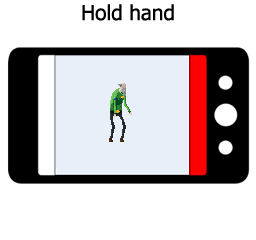
<style>
.page{position:relative;width:256px;height:240px;background:#ffffff}
.page>*{position:absolute;margin:0}
.t1{font:20.8px "Tahoma";color:#000000}
</style>
<div class="page">
<p class="t1" style="left:82px;top:4px;width:92px;height:17px">Hold hand</p>
</div>
